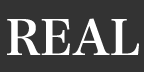
<style>
.page{position:relative;width:144px;height:72px;background:#333333}
.page>*{position:absolute;margin:0}
.t1{font:48px "TpldKhangXiDictTrial";color:#ffffff}
</style>
<div class="page">
<p class="t1" style="left:7px;top:18px;width:132px;height:37px">REAL</p>
</div>
